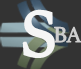
<style>
.page{position:relative;width:81px;height:69px;background:#333333}
.page>*{position:absolute;margin:0}
.t1{font:72px "SitkaBanner";color:#f5f5f5;font-weight:bold}
.t2{font:24px "SitkaBanner";color:#cecece;font-weight:bold}
</style>
<div class="page">
<p class="t1" style="left:22px;top:9px;width:33px;height:49px">S</p>
<p class="t2" style="left:54px;top:26px;width:28px;height:17px">BA</p>
</div>
